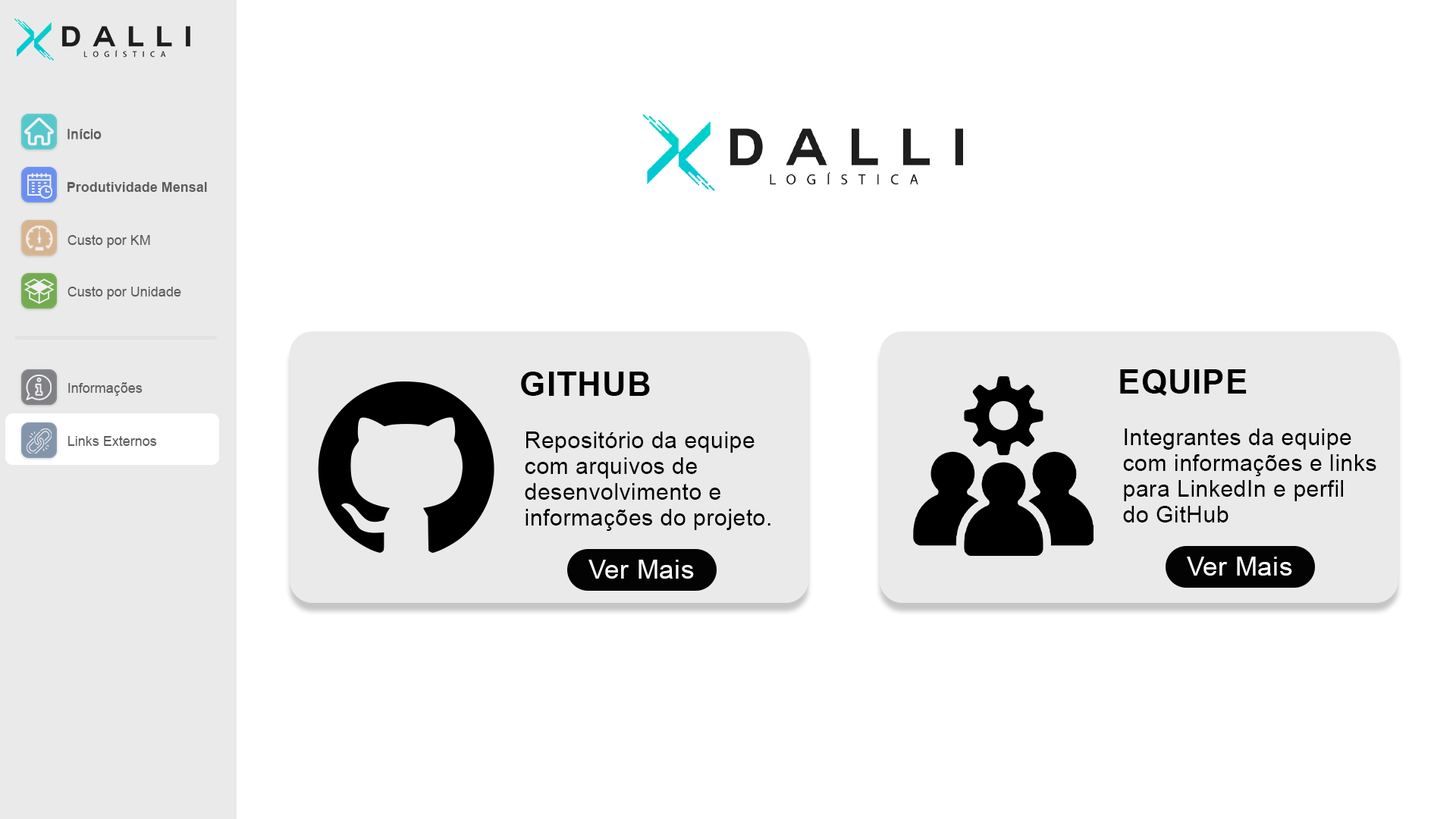
<style>
.page{position:relative;width:1456px;height:819px;background:#ffffff}
.page>*{position:absolute;margin:0}
.t1{font:13.6px "ArialMT";color:#5d5d5d;font-weight:bold}
.t2{font:13.6px "Arial-BoldMT";color:#5d5d5d}
.t3{font:13.6px "ArialMT";color:#5d5d5d}
.t4{font:33.4px "Arial-BoldMT";letter-spacing:0.02em;color:#000000}
.t5{font:33.3px "Arial-BoldMT";letter-spacing:0.02em;color:#000000}
.t6{font:22.7px/25.8px "ArialMT";letter-spacing:0.02em;color:#000000}
.t7{font:22.7px/25.7px "ArialMT";letter-spacing:0.02em;color:#000000}
.t8{font:26.4px "ArialMT";letter-spacing:0.02em;color:#ffffff}
.t9{font:26.5px "ArialMT";letter-spacing:0.02em;color:#ffffff}
</style>
<div class="page">
<p class="t1" style="left:67px;top:129px;width:35px;height:11px">Início</p>
<p class="t2" style="left:67px;top:182px;width:140px;height:10px">Produtividade Mensal</p>
<p class="t3" style="left:67px;top:235px;width:83px;height:13px">Custo por KM</p>
<p class="t3" style="left:67px;top:287px;width:114px;height:13px">Custo por Unidade</p>
<p class="t4" style="left:521px;top:372px;width:129px;height:24px">GITHUB</p>
<p class="t5" style="left:1120px;top:369px;width:127px;height:27px">EQUIPE</p>
<p class="t3" style="left:68px;top:382px;width:75px;height:14px">Informações</p>
<p class="t3" style="left:68px;top:436px;width:89px;height:10px">Links Externos</p>
<p class="t6" style="left:525px;top:431px;width:245px;height:100px;text-align:justify">Repositório da equipe <br>com arquivos de <br>desenvolvimento e <br>informações do projeto.</p>
<p class="t7" style="left:1123px;top:428px;width:253px;height:94px;text-align:justify">Integrantes da equipe<br>com informações e links<br>para LinkedIn e perfil<br>do GitHub</p>
<p class="t8" style="left:1187px;top:557px;width:105px;height:19px">Ver Mais</p>
<p class="t9" style="left:588px;top:560px;width:106px;height:19px">Ver Mais</p>
</div>
